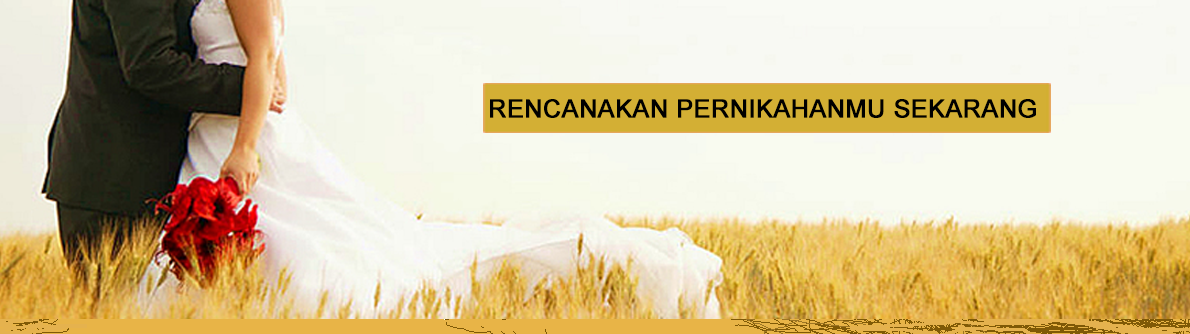
<style>
.page{position:relative;width:1190px;height:334px}
.page>*{position:absolute;margin:0}
.t1{font:25px "ArialMT";color:#000000;font-weight:bold}
</style>
<div class="page">
<p class="t1" style="left:490px;top:99px;width:546px;height:19px">RENCANAKAN PERNIKAHANMU SEKARANG</p>
</div>
